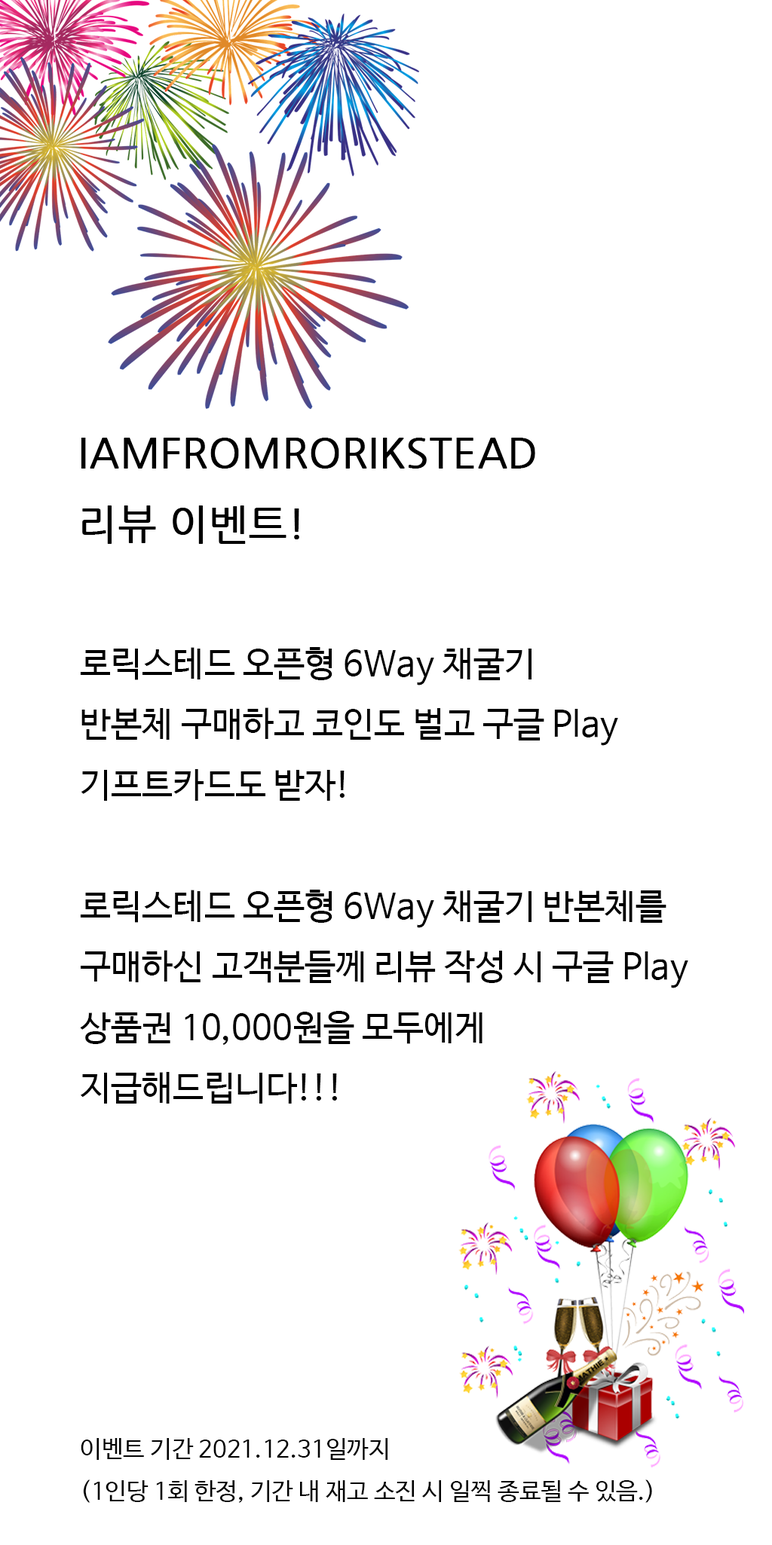
<style>
.page{position:relative;width:772px;height:1545px;background:#ffffff}
.page>*{position:absolute;margin:0}
.t1{font:40.7px "NanumGothic";color:#000000;font-weight:bold}
.t2{font:34.7px "NanumBarunGothic";color:#000000}
.t3{font:24.1px "NanumBarunGothic";color:#000000}
</style>
<div class="page">
<p class="t1" style="left:81px;top:438px;width:454px;height:106px">IAMFROMRORIKSTEAD<br>리뷰 이벤트!</p>
<p class="t2" style="left:80px;top:647px;width:608px;height:856px">로릭스테드 오픈형 6Way 채굴기<br>반본체 구매하고 코인도 벌고 구글 Play 기프트카드도 받자!<br><br>로릭스테드 오픈형 6Way 채굴기 반본체를 구매하신 고객분들께 리뷰 작성 시 구글 Play 상품권 10,000원을 모두에게 지급해드립니다!!!<br><br><br><br><br><br><span class="t3">이벤트 기간 2021.12.31일까지<br>(1인당 1회 한정, 기간 내 재고 소진 시 일찍 종료될 수 있음.)</span></p>
</div>
